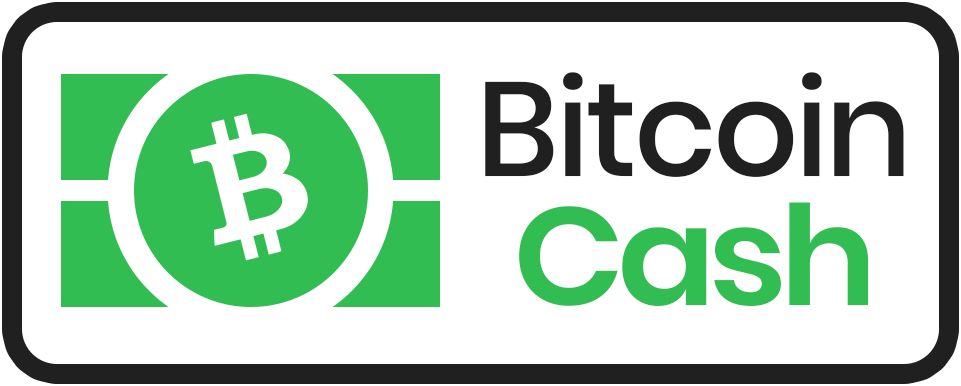
<style>
.page{position:relative;width:961px;height:386px;background:#ffffff}
.page>*{position:absolute;margin:0}
.t1{font:133.3px "Poppins-Medium";letter-spacing:-0.025em;color:#202020}
.t2{font:138.5px "Poppins-SemiBold";letter-spacing:-0.05em;color:#32bd53;scale:1.05 1}
</style>
<div class="page">
<p class="t1" style="left:485px;top:72px;width:419px;height:105px">Bitcoin</p>
<p class="t2" style="left:519px;top:202px;width:350px;height:104px">Cash</p>
</div>
